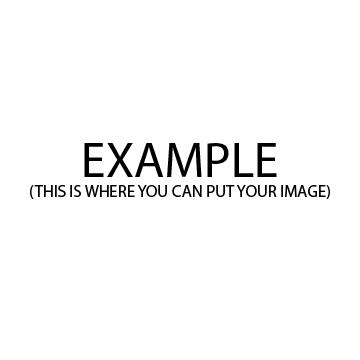
<style>
.page{position:relative;width:360px;height:360px;background:#ffffff}
.page>*{position:absolute;margin:0}
.t1{font:16.7px "MyriadPro-Regular";color:#000000}
.t2{font:50px "MyriadPro-Regular";color:#000000}
</style>
<div class="page">
<p class="t1" style="left:30px;top:143px;width:300px;height:56px;text-align:center"><span class="t2">EXAMPLE<br></span>(THIS IS WHERE YOU CAN PUT YOUR IMAGE)</p>
</div>
